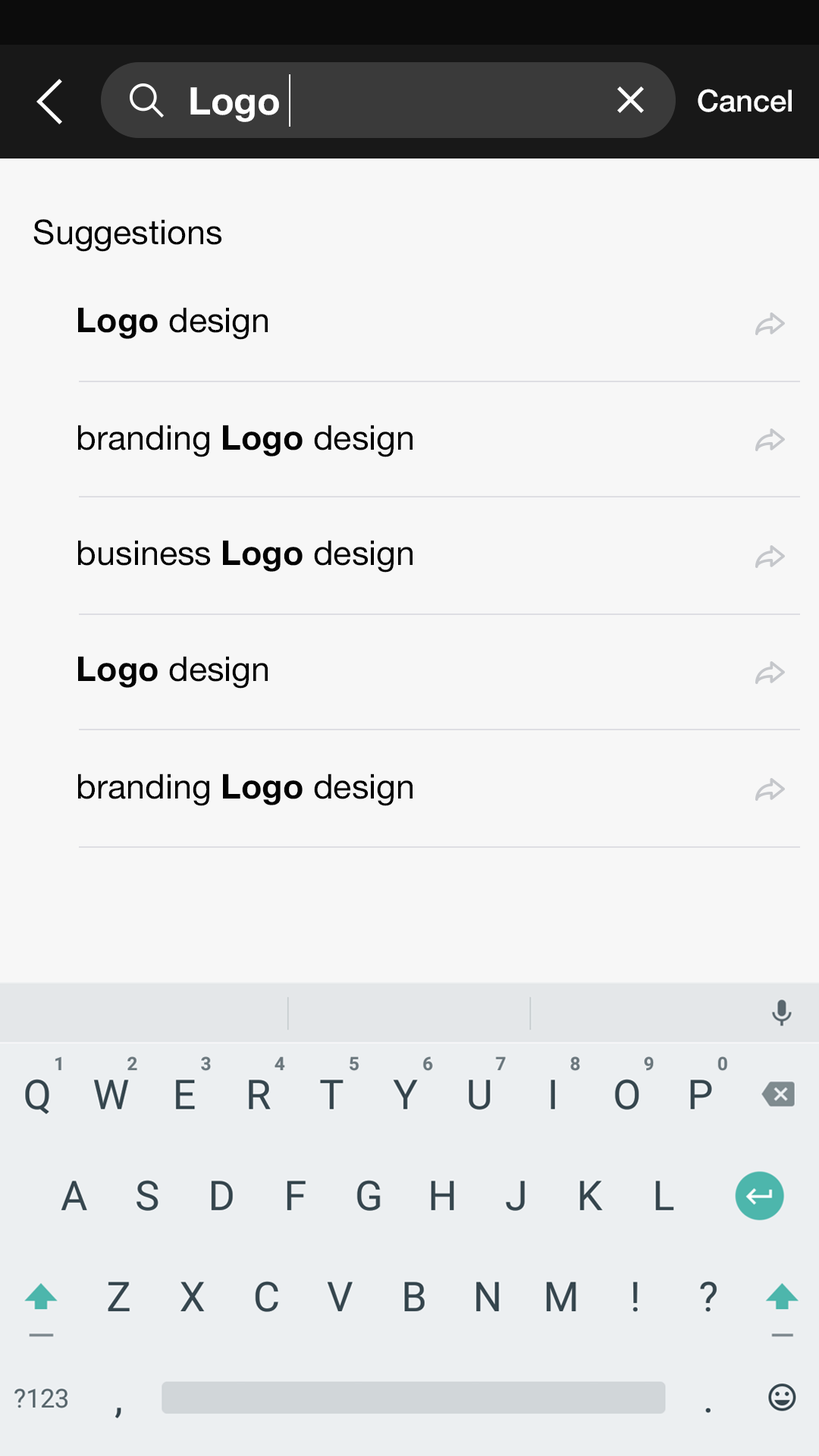
<style>
.page{position:relative;width:819px;height:1456px;background:#f7f7f7}
.page>*{position:absolute;margin:0}
.t1{font:37.9px "HelveticaNeue-Bold";color:#ffffff}
.t2{font:30.4px "HelveticaNeue-Medium";color:#ffffff}
.t3{font:34.1px "HelveticaNeue";color:#030303}
.t4{font:34.1px "HelveticaNeue-Bold";color:#030303}
</style>
<div class="page">
<p class="t1" style="left:190px;top:87px;width:89px;height:35px">Logo</p>
<p class="t2" style="left:698px;top:89px;width:94px;height:23px">Cancel</p>
<p class="t3" style="left:33px;top:219px;width:189px;height:33px">Suggestions</p>
<p class="t3" style="left:78px;top:307px;width:190px;height:33px"><span class="t4">Logo</span> design</p>
<p class="t3" style="left:78px;top:425px;width:335px;height:32px">branding <span class="t4">Logo</span> design</p>
<p class="t3" style="left:78px;top:540px;width:335px;height:33px">business <span class="t4">Logo</span> design</p>
<p class="t3" style="left:78px;top:656px;width:190px;height:33px"><span class="t4">Logo</span> design</p>
<p class="t3" style="left:78px;top:773px;width:335px;height:33px">branding <span class="t4">Logo</span> design</p>
</div>
